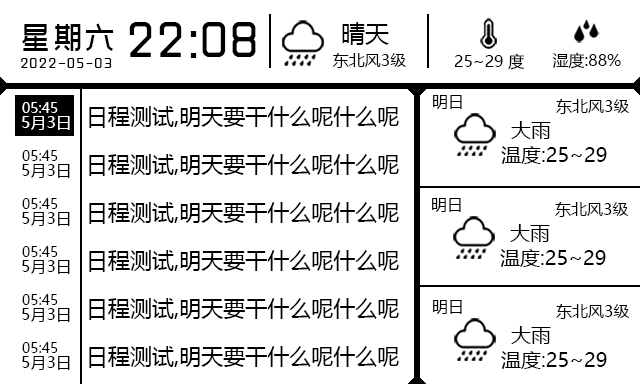
<style>
.page{position:relative;width:640px;height:384px;background:#ffffff}
.page>*{position:absolute;margin:0}
.t1{font:30px "SJxinhei-Regular";letter-spacing:0.08em;color:#000000}
.t2{font:50px "SJxinhei-Regular";color:#000000}
.t3{font:24px "MicrosoftYaHei";color:#000000}
.t4{font:16px "MicrosoftYaHei";color:#000000}
.t5{font:14px "SJxinhei-Regular";letter-spacing:0.08em;color:#000000}
.t6{font:14px "MicrosoftYaHei";color:#ffffff}
.t7{font:22px "MicrosoftYaHei";color:#000000}
.t8{font:16px "MicrosoftYaHei";color:#fffefe}
.t9{font:20px "MicrosoftYaHei";color:#000000}
.t10{font:14px "MicrosoftYaHei";color:#000000}
</style>
<div class="page">
<p class="t1" style="left:22px;top:23px;width:92px;height:28px">星期六</p>
<p class="t2" style="left:129px;top:22px;width:127px;height:36px">22:08</p>
<p class="t3" style="left:342px;top:22px;width:47px;height:23px">晴天</p>
<p class="t4" style="left:333px;top:53px;width:73px;height:15px">东北风3级</p>
<p class="t4" style="left:454px;top:53px;width:70px;height:17px">25~29 度</p>
<p class="t4" style="left:552px;top:52px;width:69px;height:17px">湿度:88%</p>
<p class="t5" style="left:21px;top:58px;width:91px;height:10px">2022-05-03</p>
<p class="t6" style="left:22px;top:102px;width:36px;height:11px">05:45</p>
<p class="t4" style="left:433px;top:95px;width:29px;height:14px">明日</p>
<p class="t4" style="left:556px;top:99px;width:74px;height:15px">东北风3级</p>
<p class="t7" style="left:89px;top:106px;width:310px;height:22px">日程测试,明天要干什么呢什么呢</p>
<p class="t8" style="left:22px;top:116px;width:48px;height:14px">5月3日</p>
<p class="t9" style="left:511px;top:121px;width:40px;height:18px">大雨</p>
<p class="t10" style="left:22px;top:150px;width:36px;height:11px">05:45</p>
<p class="t9" style="left:501px;top:146px;width:106px;height:18px">温度:25~29</p>
<p class="t7" style="left:89px;top:154px;width:310px;height:22px">日程测试,明天要干什么呢什么呢</p>
<p class="t4" style="left:22px;top:164px;width:48px;height:14px">5月3日</p>
<p class="t10" style="left:22px;top:198px;width:36px;height:11px">05:45</p>
<p class="t4" style="left:432px;top:198px;width:29px;height:14px">明日</p>
<p class="t7" style="left:89px;top:202px;width:310px;height:22px">日程测试,明天要干什么呢什么呢</p>
<p class="t4" style="left:555px;top:202px;width:74px;height:15px">东北风3级</p>
<p class="t4" style="left:22px;top:212px;width:48px;height:14px">5月3日</p>
<p class="t9" style="left:510px;top:224px;width:40px;height:18px">大雨</p>
<p class="t10" style="left:22px;top:246px;width:36px;height:11px">05:45</p>
<p class="t7" style="left:89px;top:250px;width:310px;height:22px">日程测试,明天要干什么呢什么呢</p>
<p class="t9" style="left:500px;top:249px;width:106px;height:18px">温度:25~29</p>
<p class="t4" style="left:22px;top:260px;width:48px;height:14px">5月3日</p>
<p class="t10" style="left:22px;top:294px;width:36px;height:11px">05:45</p>
<p class="t7" style="left:89px;top:298px;width:310px;height:22px">日程测试,明天要干什么呢什么呢</p>
<p class="t4" style="left:433px;top:300px;width:29px;height:14px">明日</p>
<p class="t4" style="left:556px;top:304px;width:74px;height:15px">东北风3级</p>
<p class="t4" style="left:22px;top:308px;width:48px;height:14px">5月3日</p>
<p class="t9" style="left:511px;top:326px;width:40px;height:18px">大雨</p>
<p class="t10" style="left:22px;top:342px;width:36px;height:11px">05:45</p>
<p class="t7" style="left:89px;top:346px;width:310px;height:22px">日程测试,明天要干什么呢什么呢</p>
<p class="t9" style="left:501px;top:351px;width:106px;height:18px">温度:25~29</p>
<p class="t4" style="left:22px;top:356px;width:48px;height:14px">5月3日</p>
</div>
